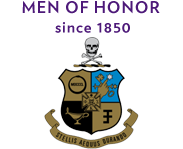
<style>
.page{position:relative;width:183px;height:149px;background:#ffffff}
.page>*{position:absolute;margin:0}
.t1{font:16.3px "Verlag-Bold";letter-spacing:0.05em;color:#4d1979}
</style>
<div class="page">
<p class="t1" style="left:22px;top:0px;width:138px;height:33px;text-align:center">MEN OF HONOR <br>since 1850</p>
</div>
